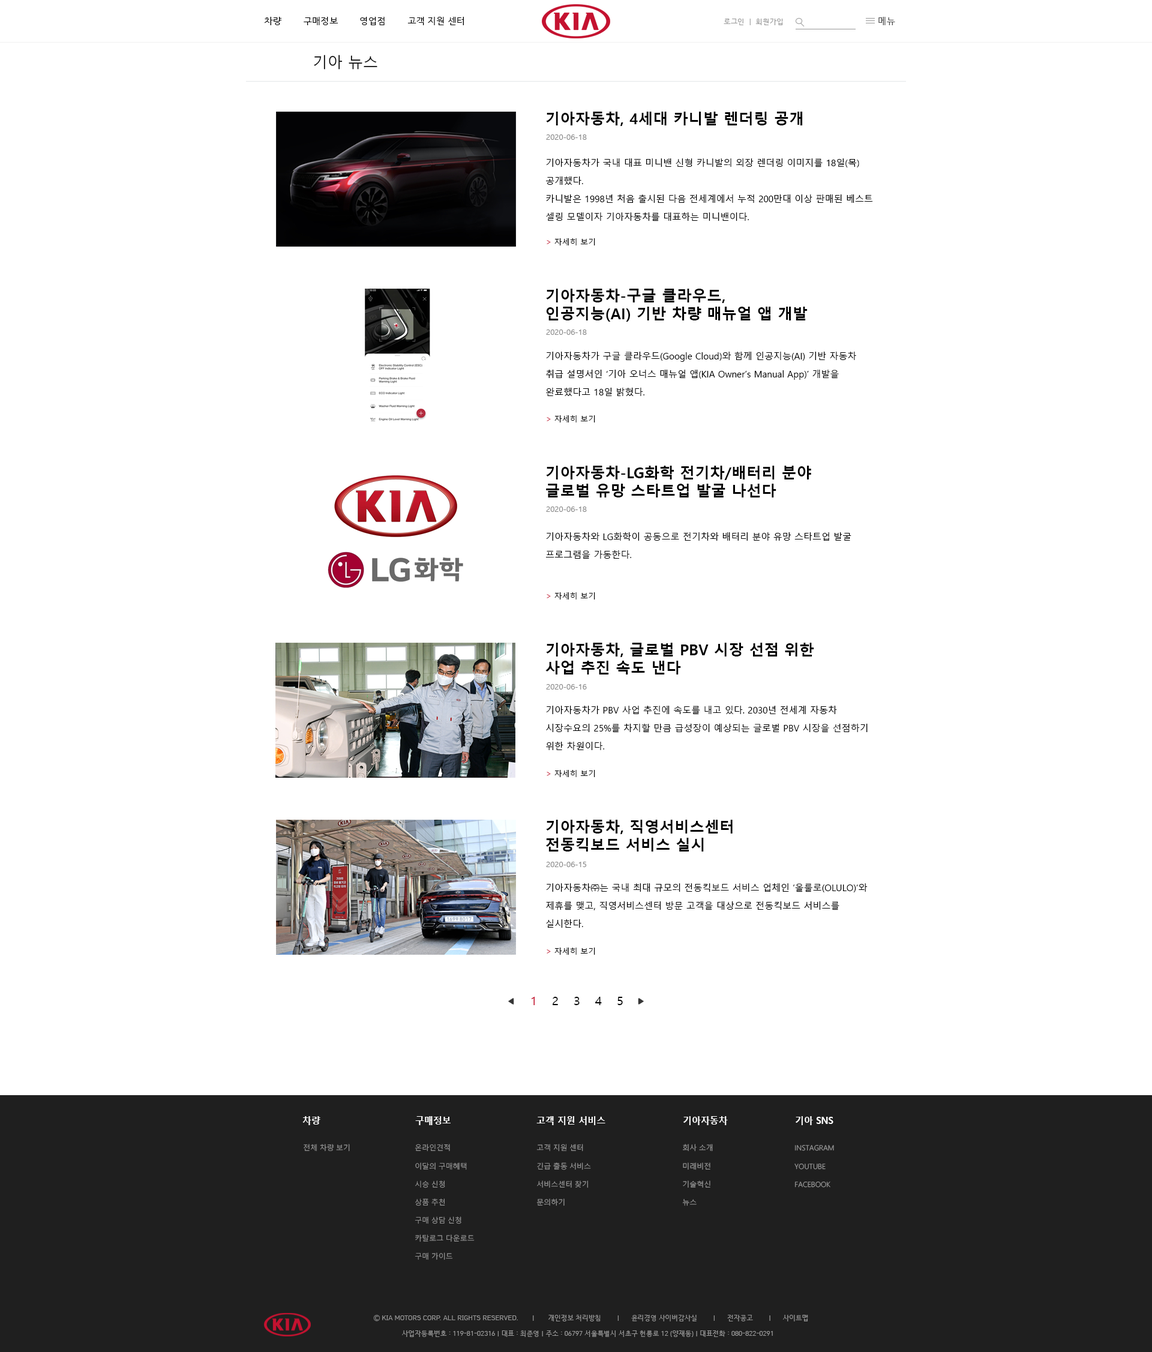
<style>
.page{position:relative;width:1152px;height:1352px;background:#ffffff}
.page>*{position:absolute;margin:0}
.t1{font:9px "HCRDotum";color:#000000}
.t2{font:9px "HCRDotum";color:#4c4c4c}
.t3{font:7.2px "HCRDotum";color:#979797}
.t4{font:14.9px "MalgunGothic";color:#000000}
.t5{font:15px "MalgunGothicBold";color:#000000}
.t6{font:7.8px "MalgunGothic";color:#888888}
.t7{font:9px/18px "MalgunGothic";color:#000000}
.t8{font:7.8px "MalgunGothic";color:#000000}
.t9{font:7.8px "MalgunGothic";color:#c41230}
.t10{font:15px/18px "MalgunGothicBold";color:#000000}
.t11{font:12px "MalgunGothic";color:#000000}
.t12{font:15px "MalgunGothic";color:#000000}
.t13{font:12px "MalgunGothic";color:#c41230}
.t14{font:9.3px "MalgunGothicBold";color:#ffffff;scale:0.96 1}
.t15{font:7.2px "MalgunGothic-Semilight";color:#979797}
.t16{font:7.2px/18.1px "MalgunGothic-Semilight";color:#979797}
.t17{font:6.6px "HCRDotum";color:#999999}
</style>
<div class="page">
<p class="t1" style="left:264px;top:17px;width:200px;height:8px">차량        구매정보        영업점        고객 지원 센터</p>
<p class="t2" style="left:878px;top:17px;width:17px;height:8px">메뉴</p>
<p class="t3" style="left:724px;top:19px;width:59px;height:6px">로그인  |  회원가입</p>
<p class="t4" style="left:314px;top:55px;width:63px;height:15px">기아 뉴스</p>
<p class="t5" style="left:546px;top:112px;width:257px;height:14px">기아자동차, 4세대 카니발 렌더링 공개</p>
<p class="t6" style="left:546px;top:134px;width:41px;height:6px">2020-06-18</p>
<p class="t7" style="left:546px;top:158px;width:327px;height:63px">기아자동차가 국내 대표 미니밴 신형 카니발의 외장 렌더링 이미지를 18일(목) 공개했다.<br>카니발은 1998년 처음 출시된 다음 전세계에서 누적 200만대 이상 판매된 베스트 셀링 모델이자 기아자동차를 대표하는 미니밴이다.</p>
<p class="t8" style="left:547px;top:238px;width:48px;height:7px"><span class="t9">&gt;</span> 자세히 보기</p>
<p class="t10" style="left:546px;top:289px;width:262px;height:33px">기아자동차-구글 클라우드, <br>인공지능(AI) 기반 차량 매뉴얼 앱 개발</p>
<p class="t6" style="left:546px;top:329px;width:41px;height:6px">2020-06-18</p>
<p class="t7" style="left:546px;top:352px;width:310px;height:44px">기아자동차가 구글 클라우드(Google Cloud)와 함께 인공지능(AI) 기반 자동차 취급 설명서인 ‘기아 오너스 매뉴얼 앱(KIA Owner’s Manual App)’ 개발을 완료했다고 18일 밝혔다.</p>
<p class="t8" style="left:547px;top:415px;width:48px;height:7px"><span class="t9">&gt;</span> 자세히 보기</p>
<p class="t10" style="left:546px;top:466px;width:265px;height:31px">기아자동차-LG화학 전기차/배터리 분야<br>글로벌 유망 스타트업 발굴 나선다</p>
<p class="t6" style="left:546px;top:506px;width:41px;height:6px">2020-06-18</p>
<p class="t7" style="left:546px;top:532px;width:305px;height:27px">기아자동차와 LG화학이 공동으로 전기차와 배터리 분야 유망 스타트업 발굴 프로그램을 가동한다.</p>
<p class="t8" style="left:547px;top:592px;width:48px;height:7px"><span class="t9">&gt;</span> 자세히 보기</p>
<p class="t10" style="left:545px;top:643px;width:269px;height:31px">기아자동차, 글로벌 PBV 시장 선점 위한<br>사업 추진 속도 낸다</p>
<p class="t6" style="left:546px;top:684px;width:41px;height:5px">2020-06-16</p>
<p class="t7" style="left:546px;top:706px;width:322px;height:44px">기아자동차가 PBV 사업 추진에 속도를 내고 있다. 2030년 전세계 자동차 시장수요의 25%를 차지할 만큼 급성장이 예상되는 글로벌 PBV 시장을 선점하기 위한 차원이다.</p>
<p class="t8" style="left:547px;top:770px;width:48px;height:7px"><span class="t9">&gt;</span> 자세히 보기</p>
<p class="t10" style="left:546px;top:820px;width:187px;height:31px">기아자동차, 직영서비스센터<br>전동킥보드 서비스 실시</p>
<p class="t6" style="left:546px;top:862px;width:41px;height:5px">2020-06-15</p>
<p class="t7" style="left:546px;top:883px;width:322px;height:45px">기아자동차㈜는 국내 최대 규모의 전동킥보드 서비스 업체인 ‘올룰로(OLULO)’와 제휴를 맺고, 직영서비스센터 방문 고객을 대상으로 전동킥보드 서비스를 실시한다.</p>
<p class="t8" style="left:547px;top:947px;width:48px;height:8px"><span class="t9">&gt;</span> 자세히 보기</p>
<p class="t11" style="left:532px;top:997px;width:91px;height:8px"><span class="t12"> </span><span class="t13">1</span> 2 3 4 5</p>
<p class="t14" style="left:302px;top:1116px;width:18px;height:9px">차량</p>
<p class="t14" style="left:415px;top:1116px;width:36px;height:9px">구매정보</p>
<p class="t14" style="left:536px;top:1116px;width:69px;height:9px">고객 지원 서비스</p>
<p class="t14" style="left:683px;top:1116px;width:45px;height:9px">기아자동차</p>
<p class="t14" style="left:796px;top:1116px;width:37px;height:9px">기아 SNS</p>
<p class="t15" style="left:304px;top:1144px;width:46px;height:7px">전체 차량 보기</p>
<p class="t16" style="left:415px;top:1144px;width:60px;height:116px">온라인견적<br>이달의 구매혜택<br>시승 신청<br>상품 추천<br>구매 상담 신청<br>카탈로그 다운로드<br>구매 가이드</p>
<p class="t16" style="left:536px;top:1144px;width:55px;height:62px">고객 지원 센터<br>긴급 출동 서비스<br>서비스센터 찾기<br>문의하기</p>
<p class="t16" style="left:682px;top:1144px;width:31px;height:62px">회사 소개<br>미래비전<br>기술혁신<br>뉴스</p>
<p class="t16" style="left:794px;top:1145px;width:40px;height:42px">INSTAGRAM<br>YOUTUBE<br>FACEBOOK</p>
<p class="t17" style="left:373px;top:1315px;width:435px;height:6px">Ⓒ KIA MOTORS CORP. ALL RIGHTS RESERVED.       |       개인정보 처리방침        |      윤리경영 사이버감사실        |      전자공고        |      사이트맵</p>
<p class="t17" style="left:402px;top:1330px;width:371px;height:7px">사업자등록번호 : 119-81-02316 | 대표 : 최준영 | 주소 : 06797 서울특별시 서초구 헌릉로 12 (양재동) | 대표전화 : 080-822-0291</p>
</div>
